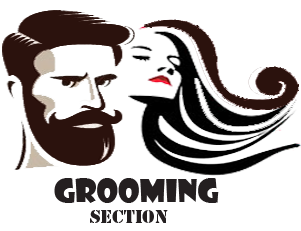
<style>
.page{position:relative;width:301px;height:231px;background:#ffffff}
.page>*{position:absolute;margin:0}
.t1{font:31.3px "ShowcardGothic-Reg";color:#241f20}
.t2{font:17.3px "StencilStd";color:#241f20}
</style>
<div class="page">
<p class="t1" style="left:54px;top:178px;width:165px;height:45px">Grooming<br> <span class="t2">Section</span></p>
</div>
